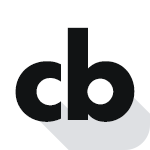
<style>
.page{position:relative;width:150px;height:150px;background:#ffffff}
.page>*{position:absolute;margin:0}
.t1{font:111px "Futura-Bold";letter-spacing:-0.04em;color:#111314}
</style>
<div class="page">
<p class="t1" style="left:15px;top:27px;width:120px;height:95px">cb</p>
</div>
